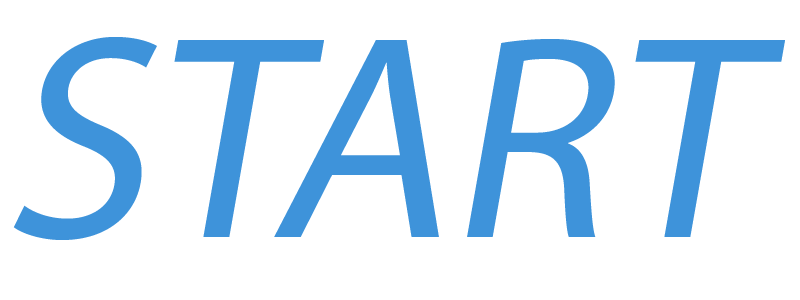
<style>
.page{position:relative;width:800px;height:300px;background:#ffffff}
.page>*{position:absolute;margin:0}
.t1{font:291.7px "MyriadPro-Regular";color:#3e93da;font-style:italic}
</style>
<div class="page">
<p class="t1" style="left:13px;top:37px;width:772px;height:203px">START</p>
</div>
